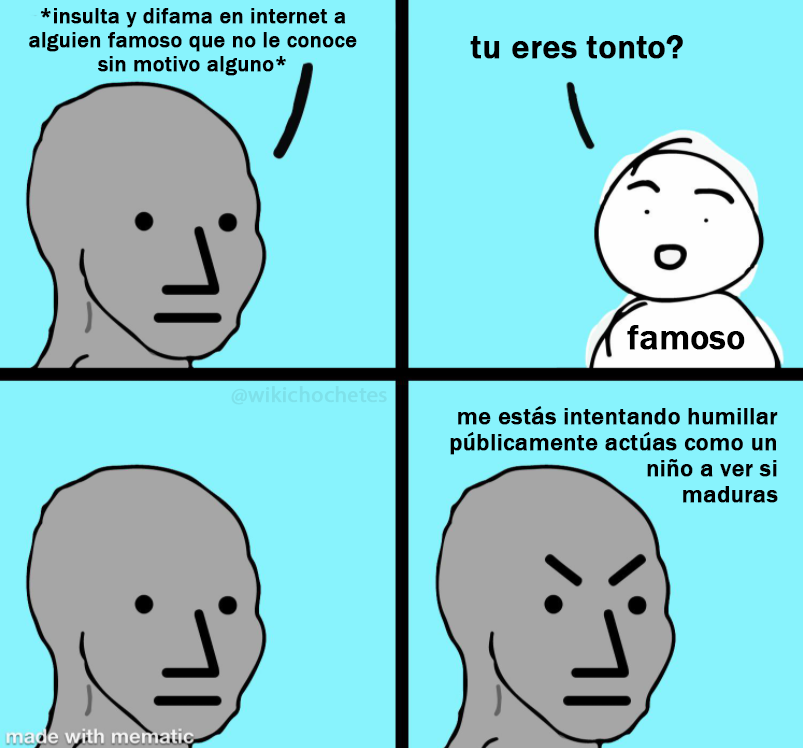
<style>
.page{position:relative;width:803px;height:748px;background:#88f3fd}
.page>*{position:absolute;margin:0}
.t1{font:22px "FranklinGothic-Medium";color:#000000;font-weight:bold}
.t2{font:34.1px "FranklinGothic-Medium";color:#000000;font-weight:bold}
.t3{font:34.7px "FranklinGothic-Medium";color:#000000;font-weight:bold}
.t4{font:22.1px "MyriadPro-Regular";color:#7ee1ea;font-weight:bold}
.t5{font:24px "FranklinGothic-Medium";color:#000000;font-weight:bold}
</style>
<div class="page">
<p class="t1" style="left:29px;top:8px;width:328px;height:68px;text-align:center">*insulta y difama en internet a<br>alguien famoso que no le conoce<br>sin motivo alguno*</p>
<p class="t2" style="left:470px;top:35px;width:213px;height:24px">tu eres tonto?</p>
<p class="t3" style="left:627px;top:325px;width:118px;height:25px">famoso</p>
<p class="t4" style="left:231px;top:386px;width:156px;height:19px">@wikichochetes</p>
<p class="t5" style="left:450px;top:406px;width:328px;height:97px;text-align:right">me estás intentando humillar<br>públicamente actúas como un<br>niño a ver si<br>maduras</p>
</div>
